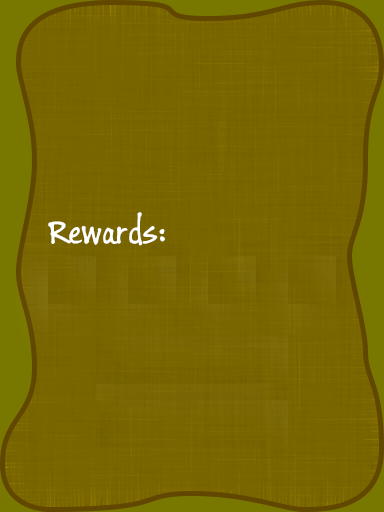
<style>
.page{position:relative;width:384px;height:512px;background:#786500}
.page>*{position:absolute;margin:0}
.t1{font:36px "BuxtonSketch";color:#ffffff}
</style>
<div class="page">
<p class="t1" style="left:48px;top:212px;width:117px;height:34px">Rewards:</p>
</div>
